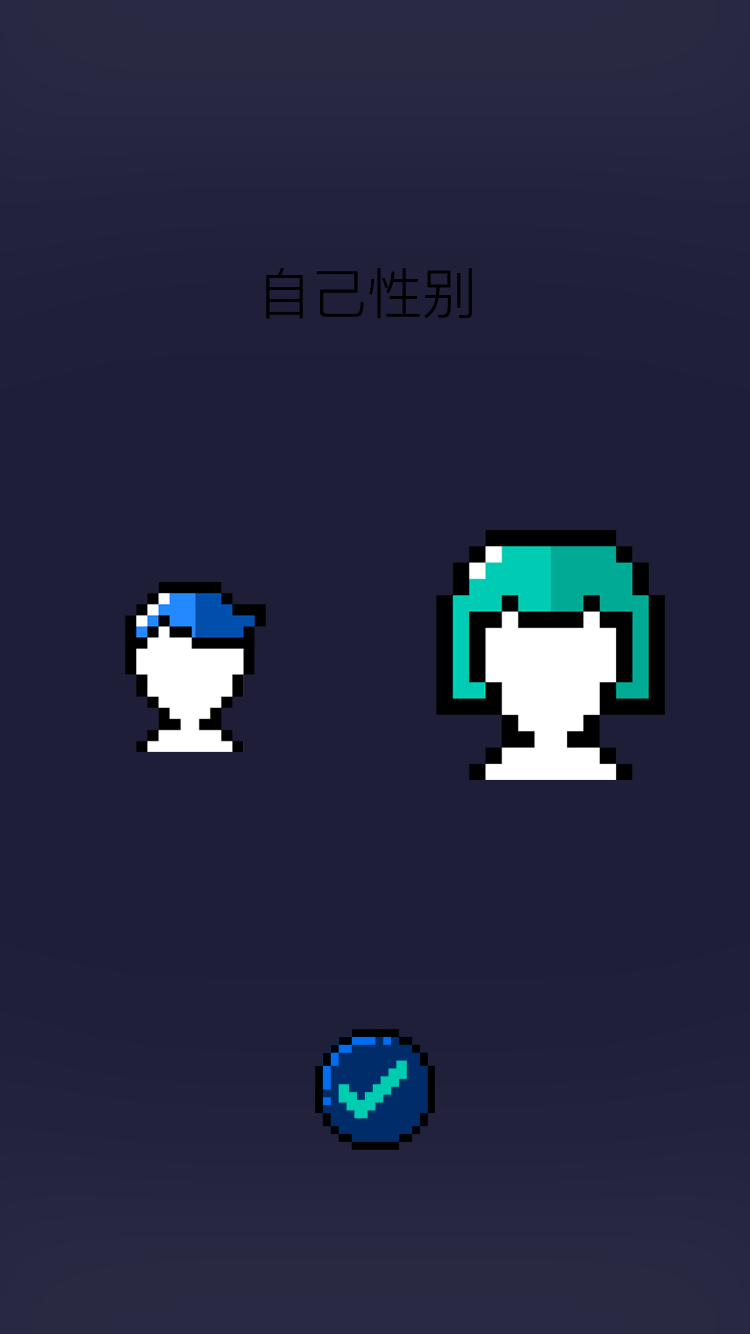
<style>
.page{position:relative;width:750px;height:1334px;background:#1e1e39}
.page>*{position:absolute;margin:0}
.t1{font:55px "PingFang-SC-Regular";color:#000000}
</style>
<div class="page">
<p class="t1" style="left:266px;top:268px;width:206px;height:51px">自己性别</p>
</div>
